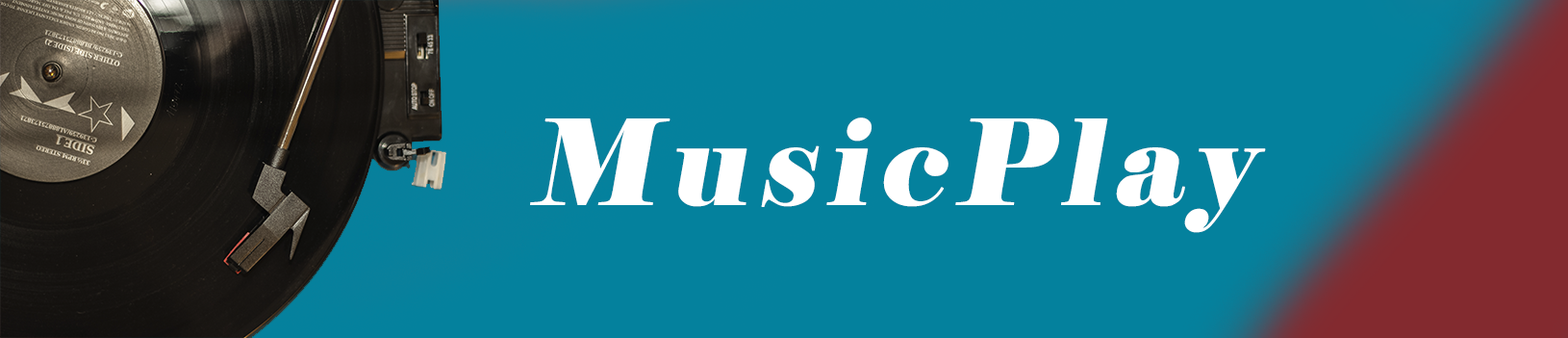
<style>
.page{position:relative;width:1568px;height:338px;background:#04819d}
.page>*{position:absolute;margin:0}
.t1{font:117.3px "Elephant-Regular";letter-spacing:0.075em;color:#ffffff;font-weight:bold;font-style:italic}
</style>
<div class="page">
<p class="t1" style="left:530px;top:117px;width:736px;height:116px">MusicPlay</p>
</div>
